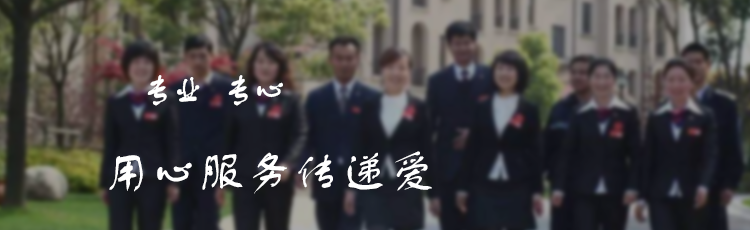
<style>
.page{position:relative;width:750px;height:230px}
.page>*{position:absolute;margin:0}
.t1{font:36px "FZSTK--GBK1-0";letter-spacing:-0.1em;color:#ffffff}
.t2{font:48px "FZSTK--GBK1-0";color:#ffffff}
</style>
<div class="page">
<p class="t1" style="left:147px;top:75px;width:136px;height:31px">专业   专心</p>
<p class="t2" style="left:109px;top:151px;width:323px;height:43px">用心服务传递爱</p>
</div>
